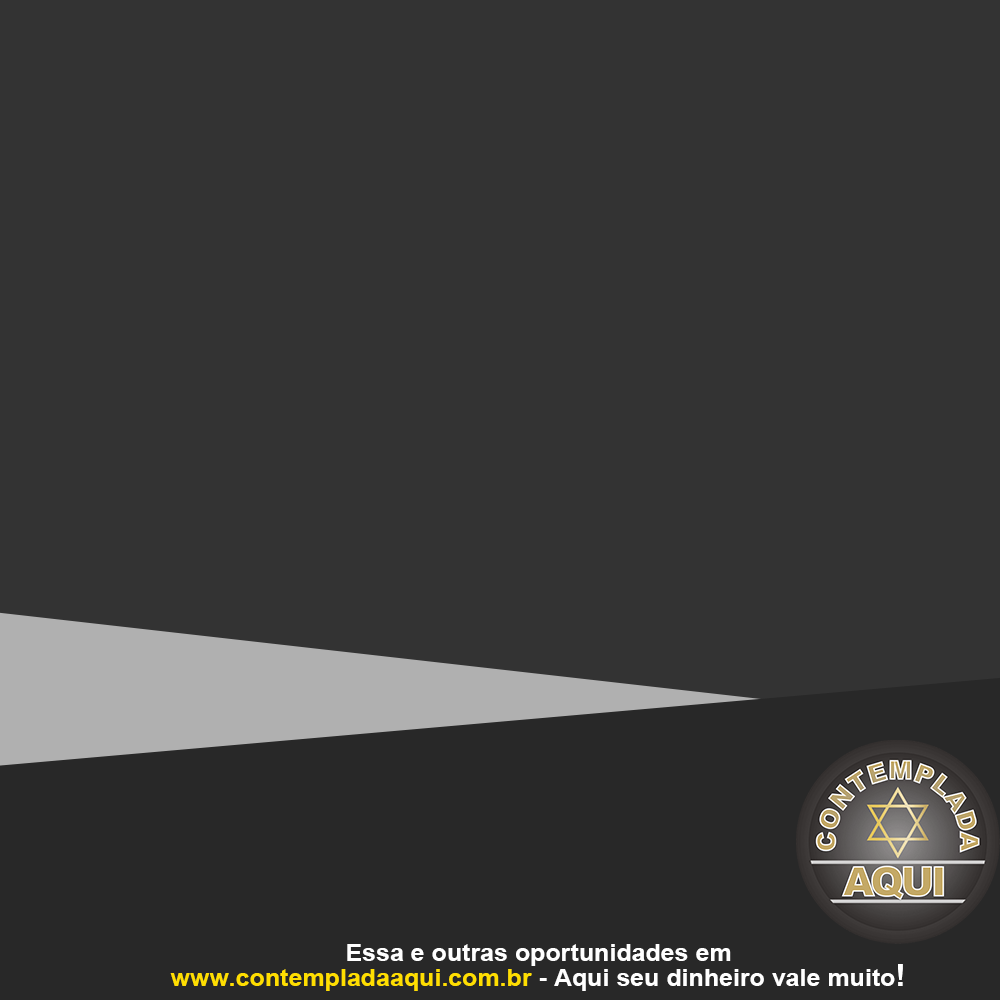
<style>
.page{position:relative;width:1000px;height:1000px;background:#333333}
.page>*{position:absolute;margin:0}
.t1{font:23.5px/25px "Arial-BoldMT";color:#ffffff;scale:1.06 1}
.t2{font:23.5px/25px "Arial-BoldMT";color:#ffde00;scale:1.06 1}
.t3{font:31.3px/25px "Arial-BoldMT";color:#ffffff;scale:1.06 1}
</style>
<div class="page">
<p class="t1" style="left:170px;top:944px;width:733px;height:47px;text-align:center">Essa e outras oportunidades em<br><span class="t2">www.contempladaaqui.com.br</span> - Aqui seu dinheiro vale muito<span class="t3">!</span></p>
</div>
